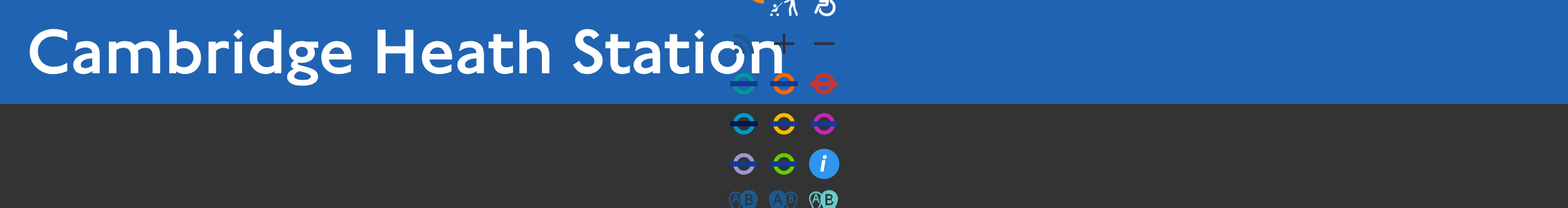
<style>
.page{position:relative;width:1568px;height:208px;background:#333333}
.page>*{position:absolute;margin:0}
.t1{font:65.3px "Johnston100W03-Medium";letter-spacing:-0.006em;color:#ffffff}
</style>
<div class="page">
<p class="t1" style="left:29px;top:29px;width:753px;height:57px">Cambridge Heath Station</p>
</div>
